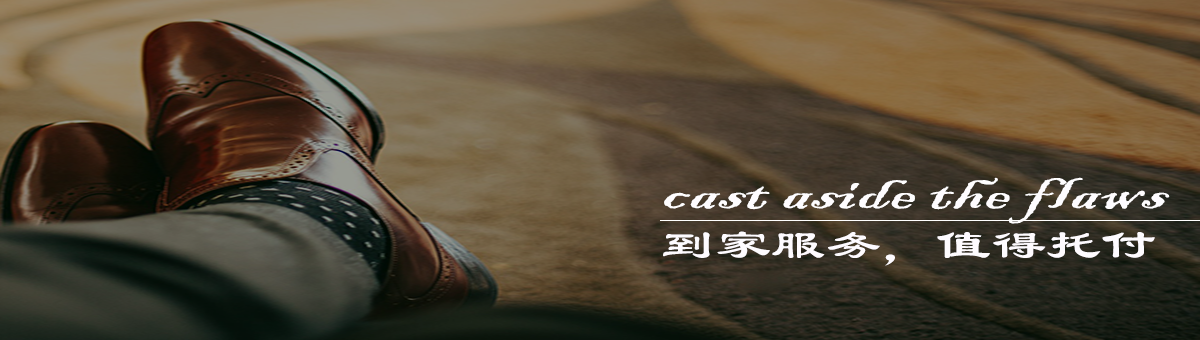
<style>
.page{position:relative;width:1200px;height:340px}
.page>*{position:absolute;margin:0}
.t1{font:52.3px "BlackadderITC-Regular";color:#fefbff;scale:1.59 1}
.t2{font:41.2px "LiSu";color:#fefbff;scale:1.33 1}
</style>
<div class="page">
<p class="t1" style="left:664px;top:177px;width:506px;height:47px">cast aside the flaws</p>
<p class="t2" style="left:663px;top:231px;width:492px;height:35px">到家服务，值得托付</p>
</div>
